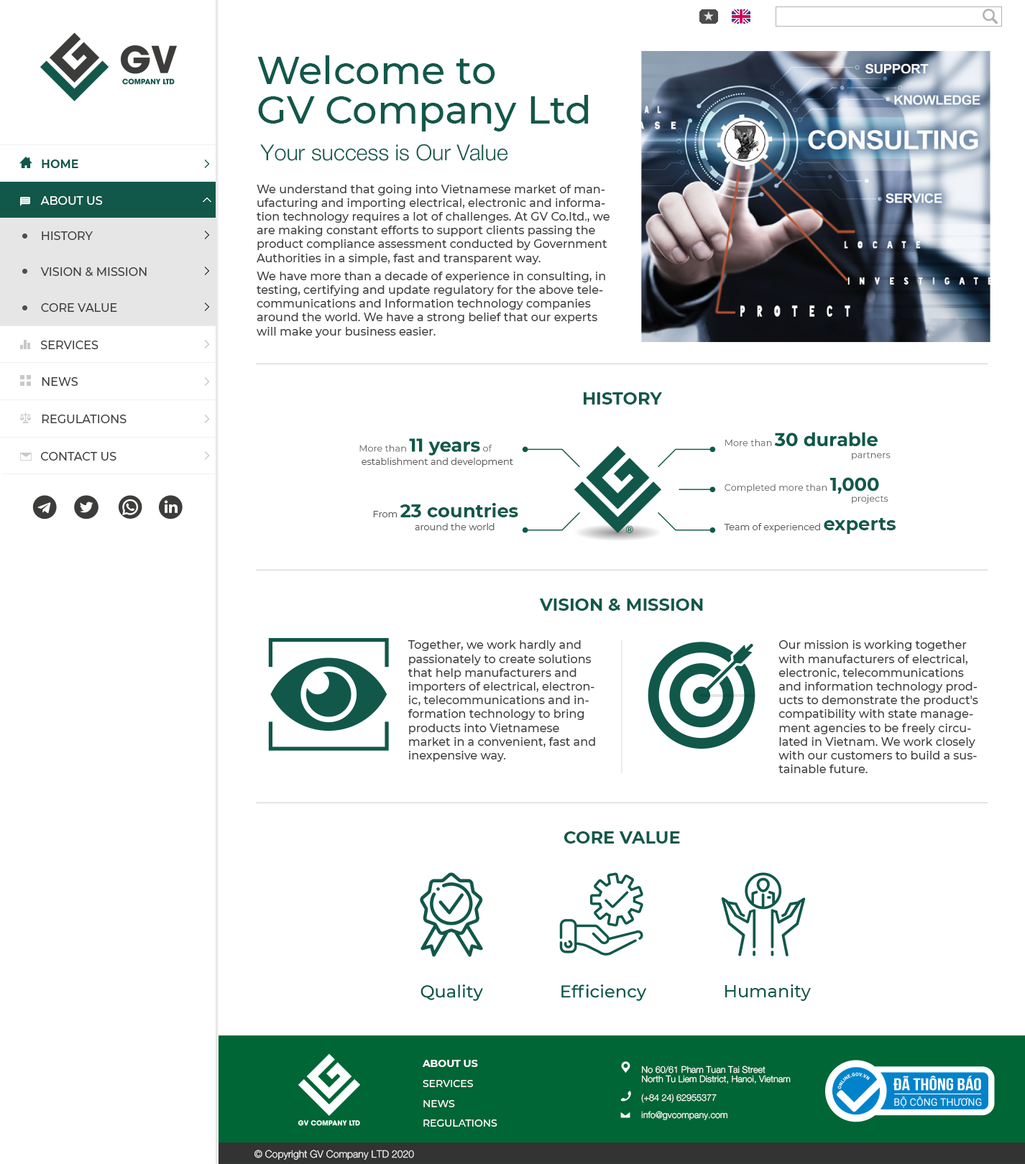
<style>
.page{position:relative;width:1025px;height:1164px;background:#ffffff}
.page>*{position:absolute;margin:0}
.t1{font:39px/39px "Montserrat-Medium";color:#11584a}
.t2{font:22px "Oxydesign-HE45-Light";color:#11584a}
.t3{font:11.5px "Montserrat-Bold";color:#11584a}
.t4{font:11.5px "Montserrat-Medium";color:#3c3c3b}
.t5{font:11.5px "Montserrat-Medium";color:#ffffff}
.t6{font:17.2px "Montserrat-Bold";color:#11584a}
.t7{font:9.2px "Montserrat-Regular";color:#575756}
.t8{font:18.5px "Montserrat-Bold";color:#11584a}
.t9{font:17.3px "Montserrat-Medium";color:#11584a}
.t10{font:10.1px "Montserrat-Bold";color:#ffffff}
.t11{font:9.1px/9.9px "Oxydesign-HE45-Light";color:#ffffff}
.t12{font:10.1px "Montserrat-Medium";color:#ffffff}
.t13{font:9.1px "Oxydesign-HE45-Light";color:#ffffff}
.t14{font:10.1px "Oxydesign-HE45-Light";color:#ffffff}
</style>
<div class="page">
<p class="t1" style="left:257px;top:55px;width:331px;height:76px">Welcome to<br>GV Company Ltd</p>
<p class="t2" style="left:260px;top:144px;width:248px;height:17px">Your success is Our Value</p>
<p class="t3" style="left:42px;top:159px;width:36px;height:9px">HOME</p>
<p class="t4" style="left:256px;top:185px;width:353px;height:153px">We understand that going into Vietnamese market of manufacturing and importing electrical, electronic and information technology requires a lot of challenges. At GV Co.ltd., we are making constant efforts to support clients passing the product compliance assessment conducted by Government Authorities in a simple, fast and transparent way. <br>We have more than a decade of experience in consulting, in testing, certifying and update regulatory for the above telecommunications and Information technology companies around the world. We have a strong belief that our experts will make your business easier.</p>
<p class="t5" style="left:40px;top:196px;width:63px;height:9px">ABOUT US</p>
<p class="t4" style="left:42px;top:231px;width:51px;height:9px">HISTORY</p>
<p class="t4" style="left:40px;top:267px;width:107px;height:9px">VISION &amp; MISSION</p>
<p class="t4" style="left:41px;top:303px;width:76px;height:9px">CORE VALUE</p>
<p class="t4" style="left:40px;top:341px;width:58px;height:8px">SERVICES</p>
<p class="t4" style="left:42px;top:377px;width:36px;height:9px">NEWS</p>
<p class="t6" style="left:583px;top:392px;width:79px;height:12px">HISTORY</p>
<p class="t4" style="left:42px;top:415px;width:84px;height:8px">REGULATIONS</p>
<p class="t4" style="left:40px;top:452px;width:76px;height:9px">CONTACT US</p>
<p class="t7" style="left:361px;top:458px;width:152px;height:9px">establishment and development</p>
<p class="t8" style="left:373px;top:503px;width:145px;height:14px"><span class="t7">From </span>23 countries</p>
<p class="t7" style="left:723px;top:518px;width:172px;height:16px">Team of experienced <span class="t8">experts</span></p>
<p class="t7" style="left:415px;top:523px;width:79px;height:7px">around the world</p>
<p class="t6" style="left:539px;top:598px;width:164px;height:13px">VISION &amp; MISSION</p>
<p class="t4" style="left:407px;top:640px;width:188px;height:122px">Together, we work hardly and passionately to create solutions that help manufacturers and importers of electrical, electronic, telecommunications and information technology to bring products into Vietnamese market in a convenient, fast and inexpensive way.</p>
<p class="t4" style="left:778px;top:640px;width:200px;height:133px">Our mission is working together with manufacturers of electrical, electronic, telecommunications and information technology products to demonstrate the product's compatibility with state management agencies to be freely circulated in Vietnam. We work closely with our customers to build a sustainable future.</p>
<p class="t6" style="left:563px;top:831px;width:117px;height:12px">CORE VALUE</p>
<p class="t9" style="left:725px;top:984px;width:85px;height:17px">Humanity</p>
<p class="t10" style="left:422px;top:1060px;width:56px;height:7px">ABOUT US</p>
<p class="t11" style="left:642px;top:1065px;width:148px;height:18px">No 60/61 Pham Tuan Tai Street<br>North Tu Liem District, Hanoi, Vietnam</p>
<p class="t12" style="left:422px;top:1080px;width:51px;height:7px">SERVICES</p>
<p class="t13" style="left:641px;top:1093px;width:75px;height:10px">(+84 24) 62955377</p>
<p class="t12" style="left:423px;top:1100px;width:32px;height:7px">NEWS</p>
<p class="t12" style="left:423px;top:1119px;width:74px;height:8px">REGULATIONS</p>
<p class="t13" style="left:641px;top:1111px;width:86px;height:9px">info@gvcompany.com</p>
<p class="t14" style="left:254px;top:1150px;width:160px;height:10px">© Copyright GV Company LTD 2020</p>
</div>
